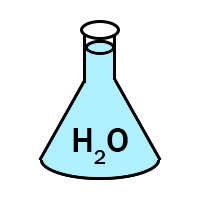
<style>
.page{position:relative;width:200px;height:200px;background:#ffffff}
.page>*{position:absolute;margin:0}
.t1{font:36px "FranklinGothic-Medium";color:#000000}
</style>
<div class="page">
<p class="t1" style="left:73px;top:128px;width:55px;height:36px">H2O</p>
</div>
